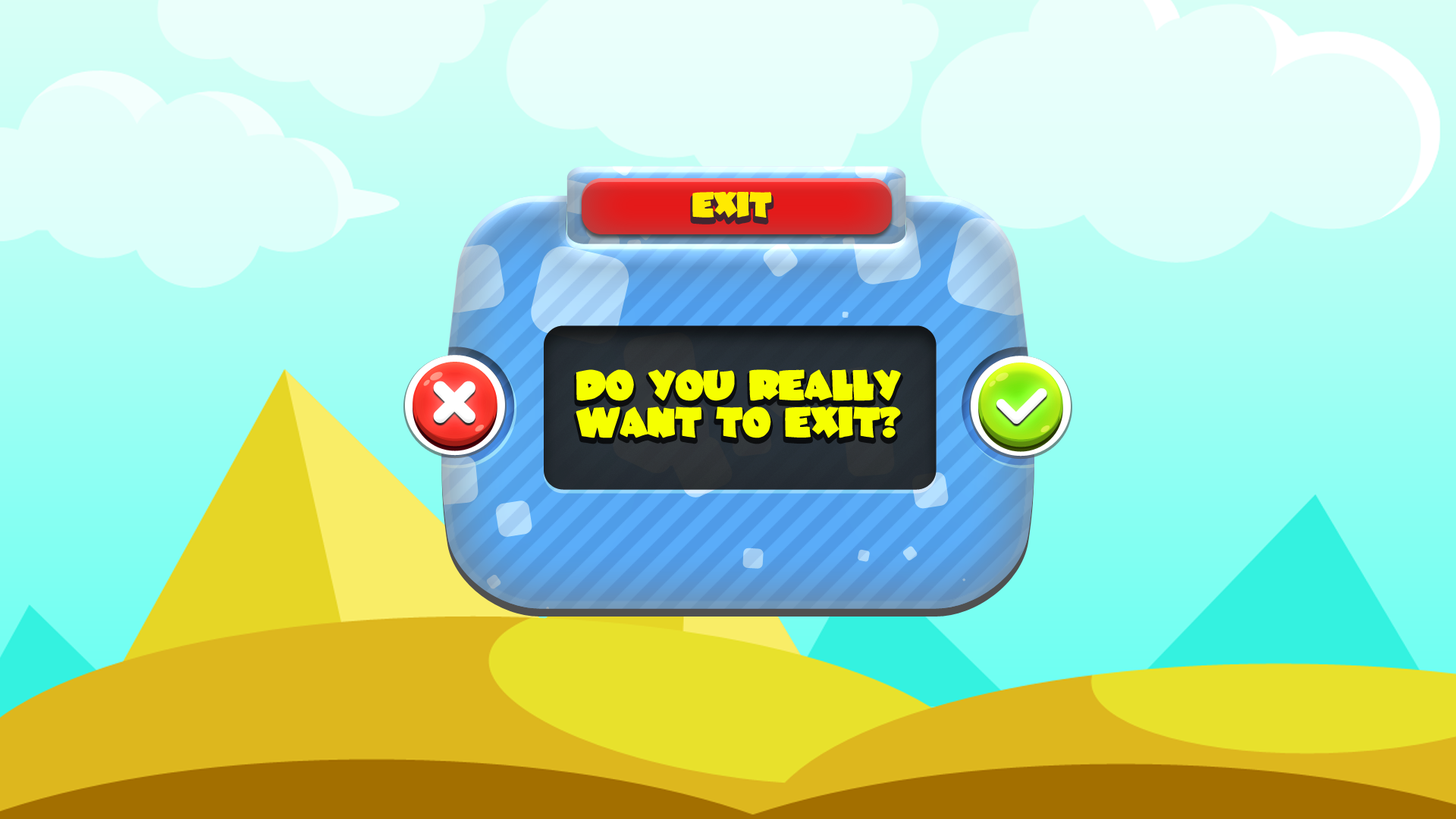
<style>
.page{position:relative;width:1456px;height:819px}
.page>*{position:absolute;margin:0}
.t1{font:25.8px "JuneBug";letter-spacing:-0.02em;color:#ffea00}
.t2{font:30.9px "JuneBug";letter-spacing:-0.02em;color:#f6ff00}
</style>
<div class="page">
<p class="t1" style="left:692px;top:192px;width:80px;height:26px">EXIT</p>
<p class="t2" style="left:576px;top:369px;width:325px;height:69px">DO YOU REALLY WANT TO EXIT?</p>
</div>
